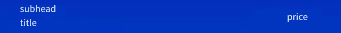
<style>
.page{position:relative;width:341px;height:33px;background:#0134bf}
.page>*{position:absolute;margin:0}
.t1{font:10px "SourceSansPro-Regular"}
</style>
<div class="page">
<p class="t1" style="left:20px;top:5px;width:36px;height:7px">subhead</p>
<p class="t1" style="left:287px;top:13px;width:21px;height:9px">price</p>
<p class="t1" style="left:20px;top:19px;width:17px;height:7px">title</p>
</div>
